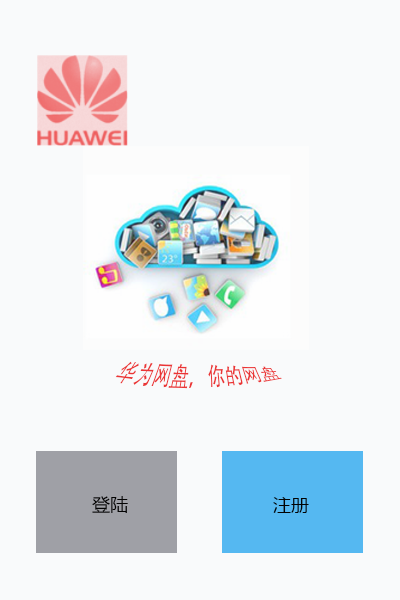
<style>
.page{position:relative;width:400px;height:600px;background:#f9fafb}
.page>*{position:absolute;margin:0}
.t1{font:18px "AdobeHeitiStd-Regular";color:#eb3535}
.t2{font:18px "MicrosoftYaHei";color:#030303}
</style>
<div class="page">
<p class="t1" style="left:115px;top:361px;width:167px;height:28px">华为网盘，你的网盘</p>
<p class="t2" style="left:92px;top:496px;width:36px;height:17px">登陆</p>
<p class="t2" style="left:273px;top:497px;width:36px;height:16px">注册</p>
</div>
